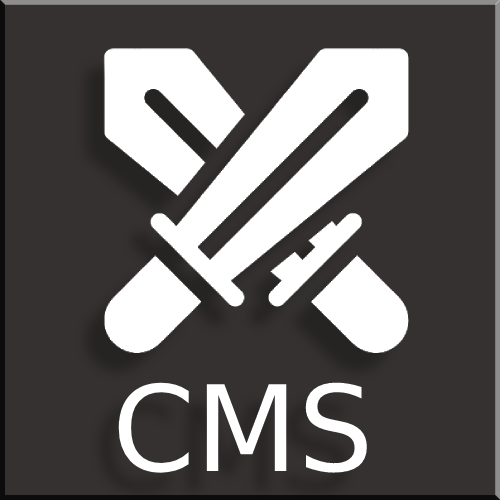
<style>
.page{position:relative;width:500px;height:500px;background:#353131}
.page>*{position:absolute;margin:0}
.t1{font:119.1px "DejaVuSans";color:#ffffff}
</style>
<div class="page">
<p class="t1" style="left:118px;top:382px;width:249px;height:91px">CMS</p>
</div>
